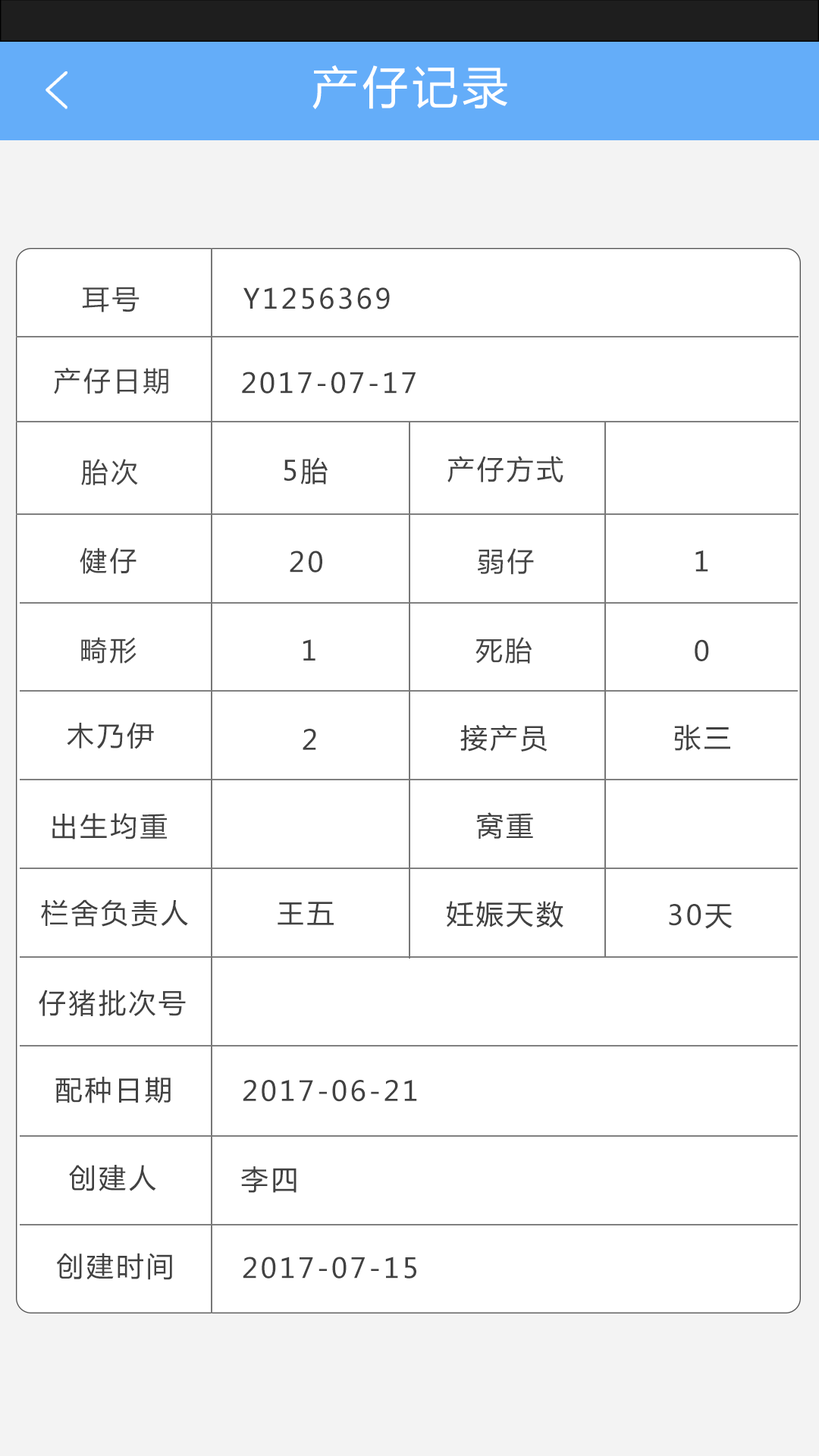
<style>
.page{position:relative;width:819px;height:1456px;background:#ffffff}
.page>*{position:absolute;margin:0}
.t1{font:45.5px "MicrosoftYaHei";letter-spacing:0.1em;color:#ffffff}
.t2{font:27.3px "MicrosoftYaHei";letter-spacing:0.1em;color:#454545}
.t3{font:27.3px "MicrosoftYaHei";letter-spacing:0.1em;color:#414141}
.t4{font:27.1px "MicrosoftYaHei";letter-spacing:0.1em;color:#454545}
</style>
<div class="page">
<p class="t1" style="left:312px;top:65px;width:195px;height:44px">产仔记录</p>
<p class="t2" style="left:82px;top:287px;width:58px;height:25px">耳号</p>
<p class="t3" style="left:243px;top:287px;width:147px;height:22px">Y1256369</p>
<p class="t4" style="left:54px;top:367px;width:114px;height:27px">产仔日期</p>
<p class="t3" style="left:242px;top:372px;width:174px;height:22px">2017-07-17</p>
<p class="t4" style="left:81px;top:459px;width:57px;height:26px">胎次</p>
<p class="t3" style="left:284px;top:457px;width:44px;height:28px">5胎</p>
<p class="t4" style="left:447px;top:456px;width:116px;height:27px">产仔方式</p>
<p class="t4" style="left:80px;top:548px;width:56px;height:26px">健仔</p>
<p class="t3" style="left:290px;top:551px;width:32px;height:22px">20</p>
<p class="t4" style="left:478px;top:548px;width:56px;height:27px">弱仔</p>
<p class="t3" style="left:695px;top:550px;width:13px;height:22px">1</p>
<p class="t4" style="left:81px;top:637px;width:55px;height:27px">畸形</p>
<p class="t3" style="left:303px;top:639px;width:12px;height:21px">1</p>
<p class="t4" style="left:475px;top:637px;width:57px;height:27px">死胎</p>
<p class="t3" style="left:695px;top:639px;width:14px;height:22px">0</p>
<p class="t3" style="left:67px;top:722px;width:87px;height:27px">木乃伊</p>
<p class="t3" style="left:460px;top:724px;width:88px;height:27px">接产员</p>
<p class="t3" style="left:674px;top:724px;width:56px;height:27px">张三</p>
<p class="t3" style="left:303px;top:729px;width:13px;height:21px">2</p>
<p class="t3" style="left:52px;top:813px;width:115px;height:26px">出生均重</p>
<p class="t3" style="left:476px;top:812px;width:57px;height:27px">窝重</p>
<p class="t3" style="left:41px;top:899px;width:147px;height:28px">栏舍负责人</p>
<p class="t3" style="left:278px;top:902px;width:56px;height:23px">王五</p>
<p class="t3" style="left:447px;top:901px;width:116px;height:27px">妊娠天数</p>
<p class="t3" style="left:669px;top:904px;width:63px;height:25px">30天</p>
<p class="t3" style="left:39px;top:990px;width:147px;height:26px">仔猪批次号</p>
<p class="t3" style="left:55px;top:1076px;width:116px;height:27px">配种日期</p>
<p class="t3" style="left:243px;top:1080px;width:174px;height:22px">2017-06-21</p>
<p class="t3" style="left:69px;top:1165px;width:87px;height:26px">创建人</p>
<p class="t3" style="left:241px;top:1166px;width:56px;height:27px">李四</p>
<p class="t3" style="left:56px;top:1253px;width:116px;height:27px">创建时间</p>
<p class="t3" style="left:243px;top:1257px;width:173px;height:22px">2017-07-15</p>
</div>
